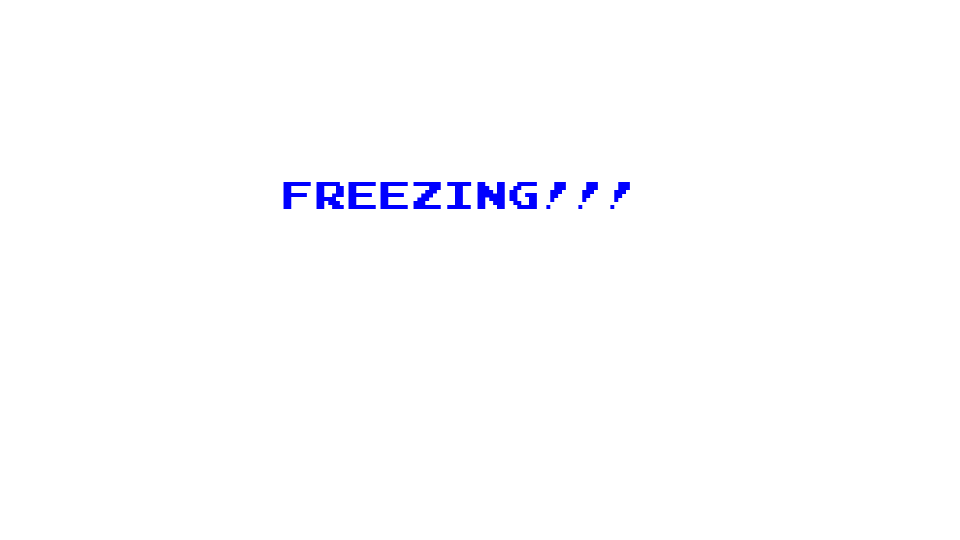
<style>
.page{position:relative;width:960px;height:540px;background:#ffffff}
.page>*{position:absolute;margin:0}
.t1{font:39px "JoystixMonospace-Regular";color:#0000ff}
</style>
<div class="page">
<p class="t1" style="left:283px;top:182px;width:347px;height:27px">freezing!!!</p>
</div>
